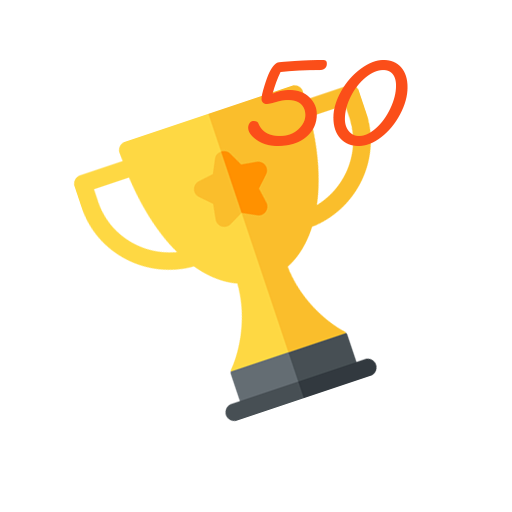
<style>
.page{position:relative;width:512px;height:512px;background:#ffffff}
.page>*{position:absolute;margin:0}
.t1{font:120px "MVBoli";color:#fb4e19}
</style>
<div class="page">
<p class="t1" style="left:248px;top:60px;width:160px;height:86px">50</p>
</div>
